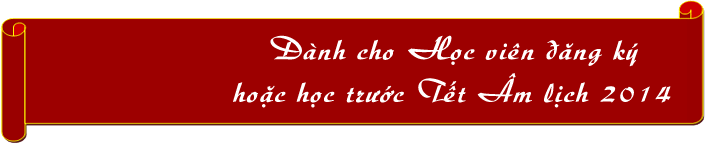
<style>
.page{position:relative;width:705px;height:144px;background:#9d0000}
.page>*{position:absolute;margin:0}
.t1{font:33.4px/35.1px "UVNThuTu";letter-spacing:0.025em;color:#ffffff;font-weight:bold}
</style>
<div class="page">
<p class="t1" style="left:233px;top:35px;width:438px;height:73px;text-align:center">Dành cho Học viên đăng ký<br>hoặc học trước Tết Âm lịch 2014</p>
</div>
